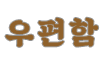
<style>
.page{position:relative;width:103px;height:66px;background:#ffffff}
.page>*{position:absolute;margin:0}
.t1{font:31.7px "SDKukdetopokki-bBd";letter-spacing:0.08em;color:#8f612b}
</style>
<div class="page">
<p class="t1" style="left:5px;top:17px;width:94px;height:30px">우편함</p>
</div>
